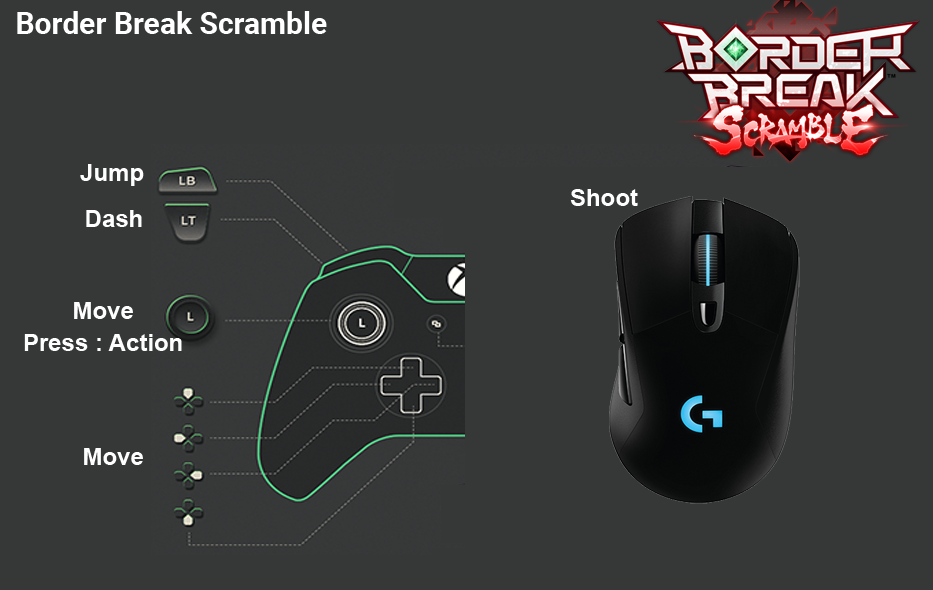
<style>
.page{position:relative;width:933px;height:590px;background:#363838}
.page>*{position:absolute;margin:0}
.t1{font:30px "Roboto-Bold";color:#ffffff}
.t2{font:24px "Arial-BoldMT";color:#fefefe}
.t3{font:24px/32px "Arial-BoldMT";color:#fefefe}
</style>
<div class="page">
<p class="t1" style="left:17px;top:11px;width:310px;height:23px">Border Break Scramble</p>
<p class="t2" style="left:80px;top:164px;width:64px;height:22px">Jump</p>
<p class="t2" style="left:570px;top:189px;width:68px;height:17px">Shoot</p>
<p class="t2" style="left:86px;top:210px;width:56px;height:17px">Dash</p>
<p class="t3" style="left:24px;top:302px;width:158px;height:49px;text-align:center">Move<br>Press : Action</p>
<p class="t2" style="left:84px;top:448px;width:59px;height:17px">Move</p>
</div>
